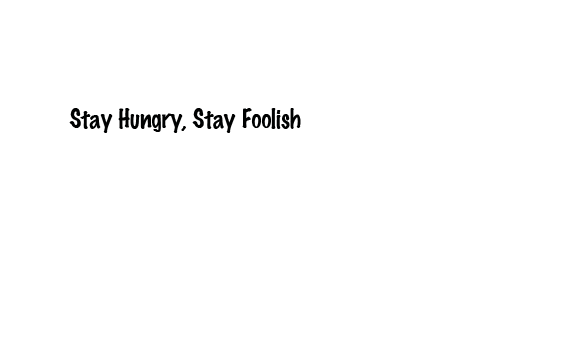
<style>
.page{position:relative;width:567px;height:340px;background:#ffffff}
.page>*{position:absolute;margin:0}
.t1{font:24px "MarkerFelt-Thin";color:#000101}
</style>
<div class="page">
<p class="t1" style="left:69px;top:108px;width:232px;height:25px">Stay Hungry, Stay Foolish</p>
</div>
